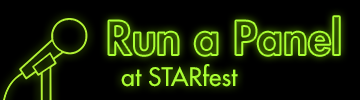
<style>
.page{position:relative;width:360px;height:100px;background:#000000}
.page>*{position:absolute;margin:0}
.t1{font:45.8px "FuturaStd-Heavy"}
.t2{font:25px "FuturaStd-Medium";color:#aaff33}
</style>
<div class="page">
<p class="t1" style="left:108px;top:16px;width:232px;height:40px">Run a Panel</p>
<p class="t2" style="left:121px;top:64px;width:117px;height:23px">at STARfest</p>
</div>
